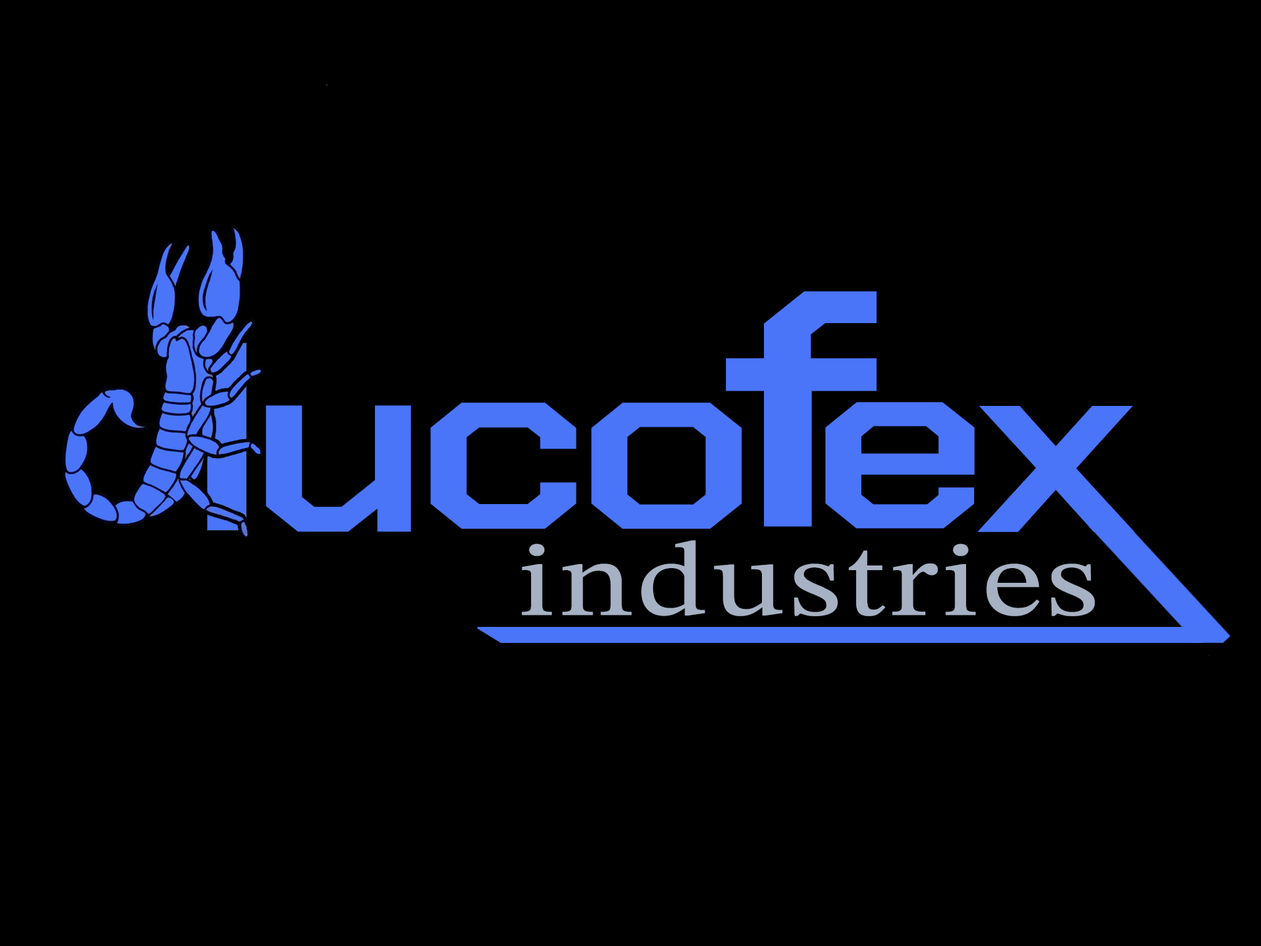
<style>
.page{position:relative;width:1261px;height:946px;background:#000000}
.page>*{position:absolute;margin:0}
.t1{font:336.9px "ChakraPetch-SemiBold";letter-spacing:0.023em;color:#4a75f8;scale:1.25 1}
.t2{font:252.7px "ChakraPetch-SemiBold";letter-spacing:0.023em;color:#4a75f8;scale:1.25 1}
.t3{font:105.3px "STIXTwoText";letter-spacing:0.023em;color:#a6b1c3;scale:1.25 1}
</style>
<div class="page">
<p class="t1" style="left:726px;top:291px;width:151px;height:235px">f</p>
<p class="t2" style="left:825px;top:402px;width:150px;height:126px">e</p>
<p class="t2" style="left:266px;top:405px;width:145px;height:127px">u</p>
<p class="t2" style="left:430px;top:402px;width:147px;height:126px">c</p>
<p class="t2" style="left:591px;top:402px;width:151px;height:126px">o</p>
<p class="t2" style="left:978px;top:406px;width:156px;height:126px">x</p>
<p class="t3" style="left:522px;top:540px;width:573px;height:76px">industries</p>
</div>
